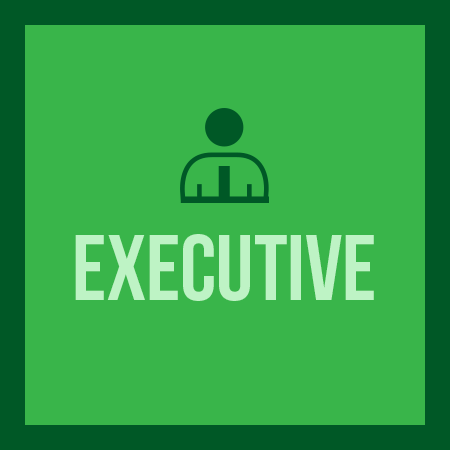
<style>
.page{position:relative;width:450px;height:450px;background:#39b54a}
.page>*{position:absolute;margin:0}
.t1{font:93.3px "BebasNeueBold";color:#bef3c5}
</style>
<div class="page">
<p class="t1" style="left:75px;top:234px;width:299px;height:67px">executive</p>
</div>
